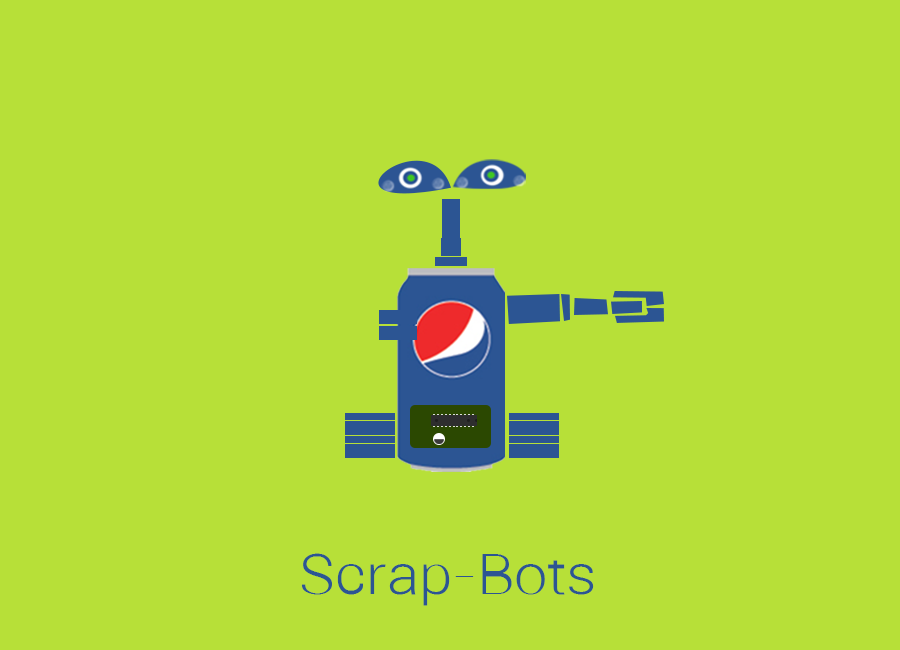
<style>
.page{position:relative;width:900px;height:650px;background:#b7e038}
.page>*{position:absolute;margin:0}
.t1{font:56.7px "Roboto-Light";color:#2c5593;scale:1.05 1}
</style>
<div class="page">
<p class="t1" style="left:301px;top:553px;width:293px;height:53px">Scrap-Bots</p>
</div>
